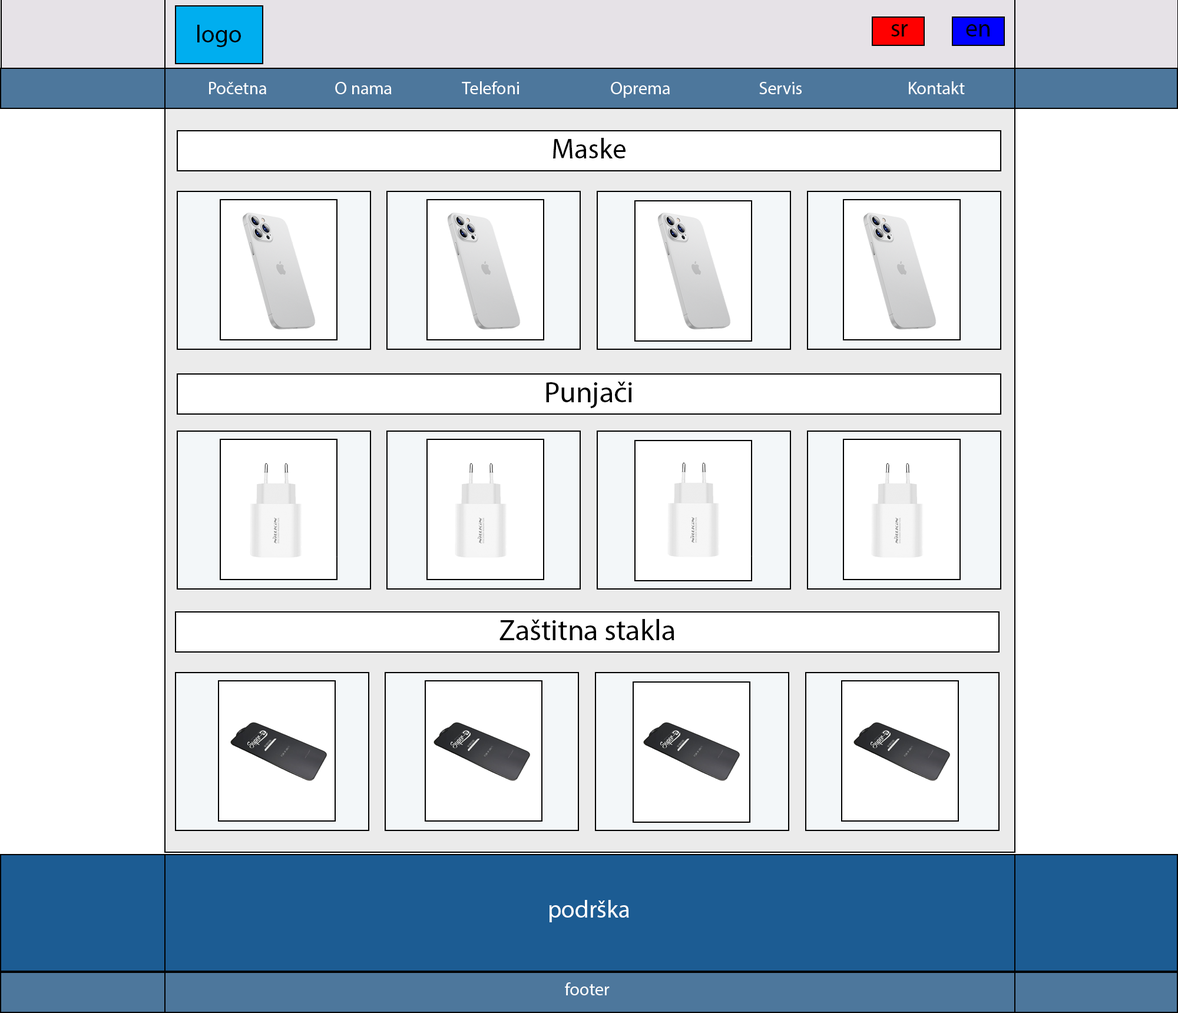
<style>
.page{position:relative;width:1178px;height:1013px;background:#ffffff}
.page>*{position:absolute;margin:0}
.t1{font:24.5px "MyriadPro-Regular";color:#000101}
.t2{font:17.7px "MyriadPro-Regular";color:#ffffff}
.t3{font:17.7px "MyriadPro-Regular";color:#000101}
.t4{font:28.3px "MyriadPro-Regular";color:#000000}
.t5{font:29.4px "MyriadPro-Regular";color:#000000}
.t6{font:24.5px "MyriadPro-Regular";color:#ffffff}
</style>
<div class="page">
<p class="t1" style="left:197px;top:25px;width:44px;height:22px">logo</p>
<p class="t1" style="left:891px;top:24px;width:16px;height:13px">sr</p>
<p class="t1" style="left:966px;top:24px;width:23px;height:13px">en</p>
<p class="t2" style="left:209px;top:81px;width:755px;height:17px"><span class="t3"> </span>Početna    O nama    Telefoni     Oprema     Servis   Kontakt</p>
<p class="t4" style="left:553px;top:138px;width:72px;height:20px">Maske</p>
<p class="t5" style="left:546px;top:382px;width:86px;height:26px">Punjači</p>
<p class="t5" style="left:499px;top:619px;width:175px;height:21px">Zaštitna stakla</p>
<p class="t6" style="left:549px;top:900px;width:80px;height:22px">podrška</p>
<p class="t2" style="left:565px;top:982px;width:44px;height:13px">footer</p>
</div>
